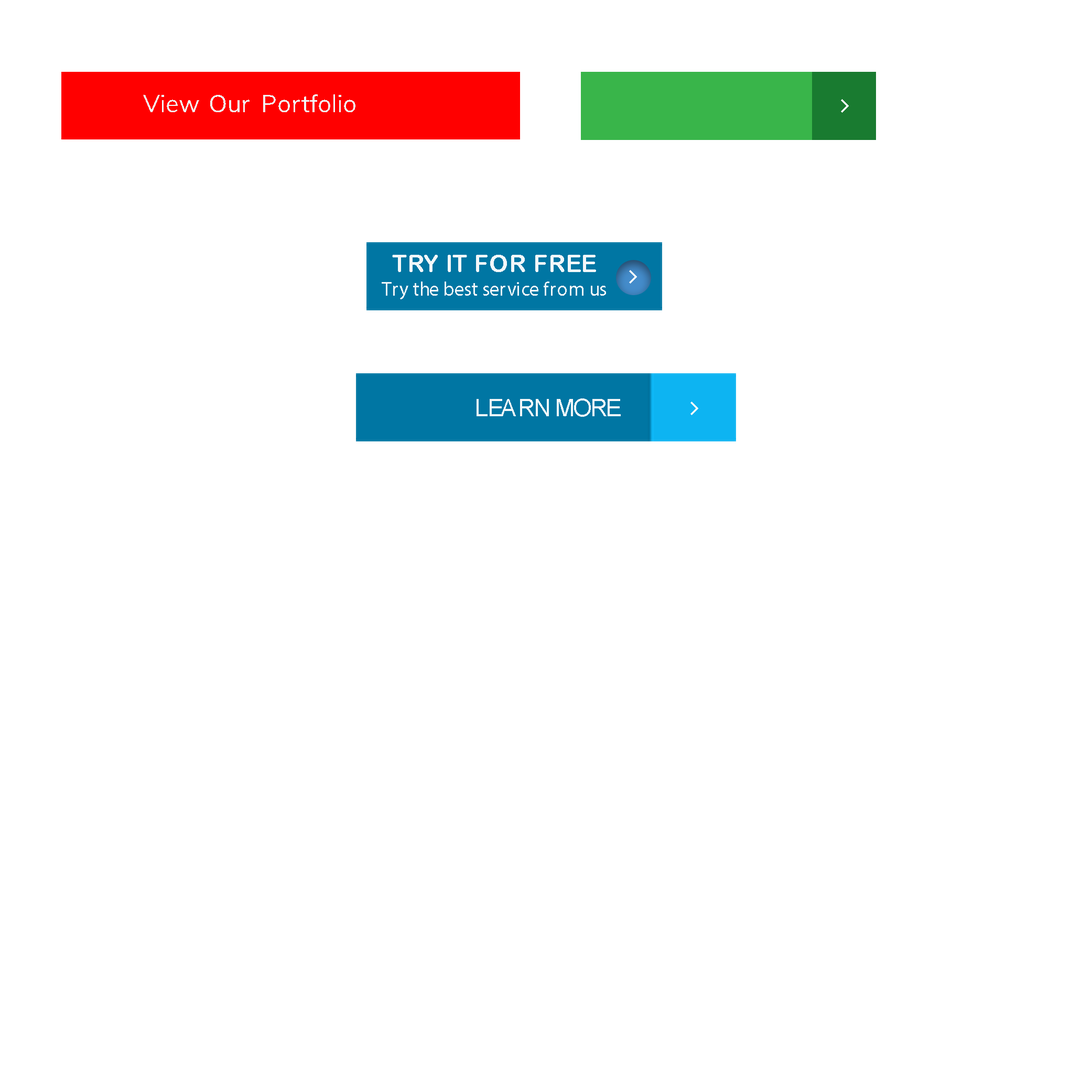
<style>
.page{position:relative;width:1092px;height:1092px;background:#ffffff}
.page>*{position:absolute;margin:0}
.t1{font:19.7px "MyriadPro-Regular";color:#f3f7f9}
.t2{font:24px "ArialRoundedMTBold";color:#f3f7f9}
.t3{font:24px "ArialMT";color:#f3f7f9}
</style>
<div class="page">
<p class="t1" style="left:382px;top:255px;width:224px;height:44px;text-align:center"><span class="t2">TRY IT FOR FREE<br></span>Try the best service from us</p>
<p class="t3" style="left:477px;top:398px;width:144px;height:19px">LEARN MORE</p>
<p class="t3" style="left:477px;top:398px;width:144px;height:19px">LEARN MORE</p>
</div>
